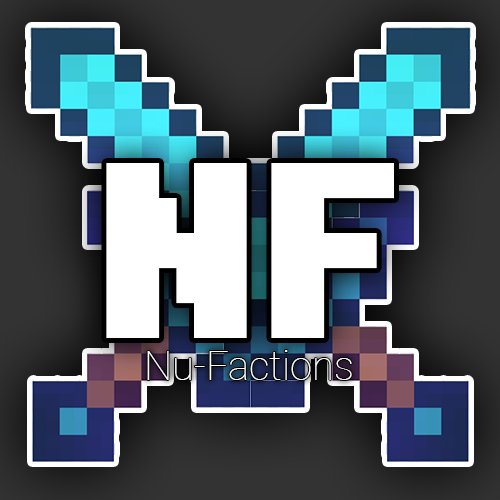
<style>
.page{position:relative;width:500px;height:500px}
.page>*{position:absolute;margin:0}
.t1{font:250px "MinecraftTen";color:#ffffff}
.t2{font:40px "Roboto-Thin";color:#ffffff}
</style>
<div class="page">
<p class="t1" style="left:106px;top:163px;width:288px;height:175px">Nf</p>
<p class="t2" style="left:147px;top:350px;width:205px;height:30px">Nu-Factions</p>
</div>
